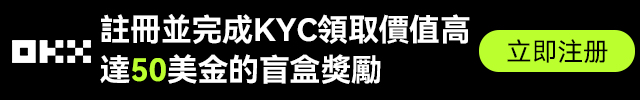
<style>
.page{position:relative;width:640px;height:100px;background:#000000}
.page>*{position:absolute;margin:0}
.t1{font:31px/40px "HarmonyOS_Sans_SC_Bold";letter-spacing:-0.01em;color:#ffffff}
.t2{font:31px/40px "HarmonyOS_Sans_SC_Bold";letter-spacing:-0.01em;color:#bcff2f}
.t3{font:25.7px "HarmonyOS_Sans_SC";color:#000000}
</style>
<div class="page">
<p class="t1" style="left:100px;top:14px;width:370px;height:70px">註冊並完成KYC領取價值高<br>達<span class="t2">50</span>美金的盲盒獎勵</p>
<p class="t3" style="left:507px;top:39px;width:101px;height:24px">立即注册</p>
</div>
